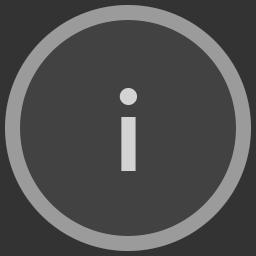
<style>
.page{position:relative;width:256px;height:256px;background:#424242}
.page>*{position:absolute;margin:0}
.t1{font:107px "AFuturicaLtSemiBold";letter-spacing:0.05em;color:#d3d3d3}
</style>
<div class="page">
<p class="t1" style="left:119px;top:88px;width:19px;height:83px">i</p>
</div>
